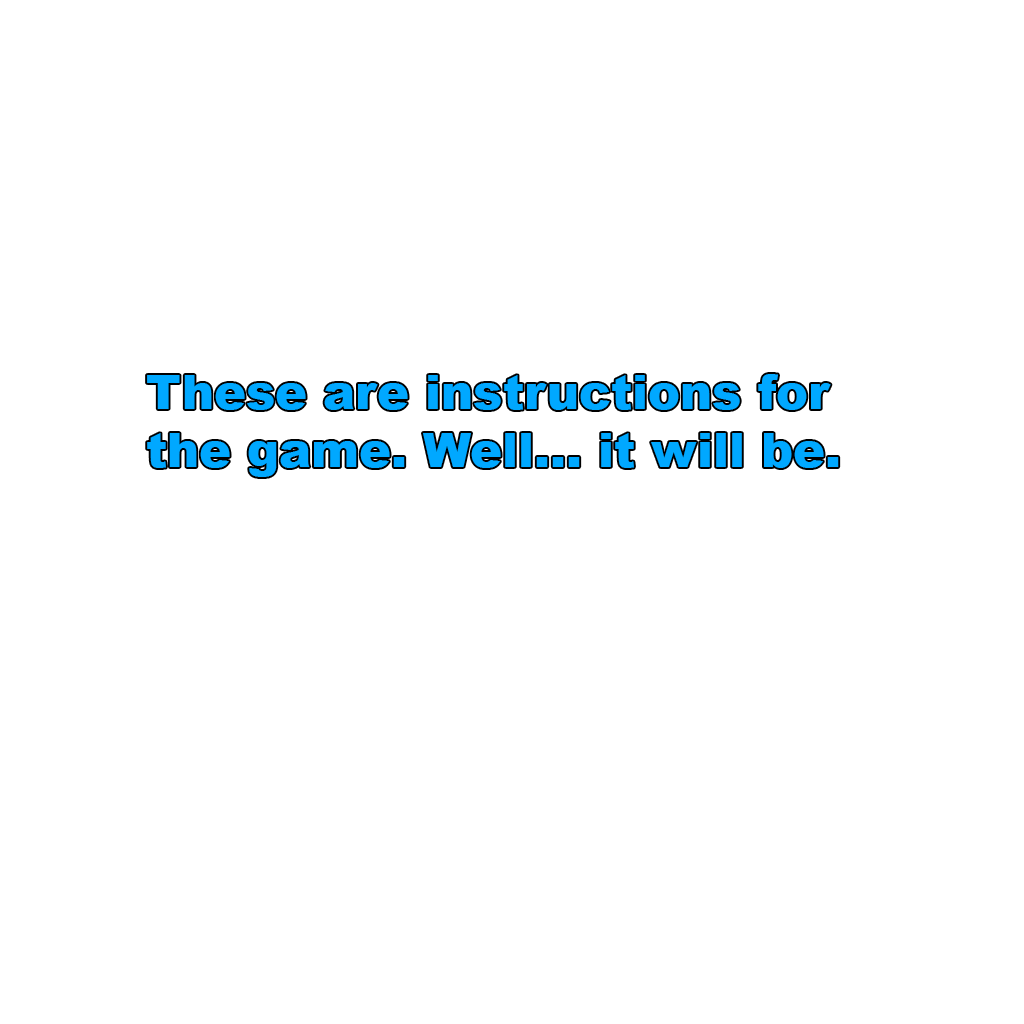
<style>
.page{position:relative;width:1024px;height:1024px;background:#ffffff}
.page>*{position:absolute;margin:0}
.t1{font:48px "Arial-Black";color:#00a8ff}
</style>
<div class="page">
<p class="t1" style="left:147px;top:374px;width:692px;height:103px">These are instructions for <br>the game. Well... it will be.</p>
</div>
